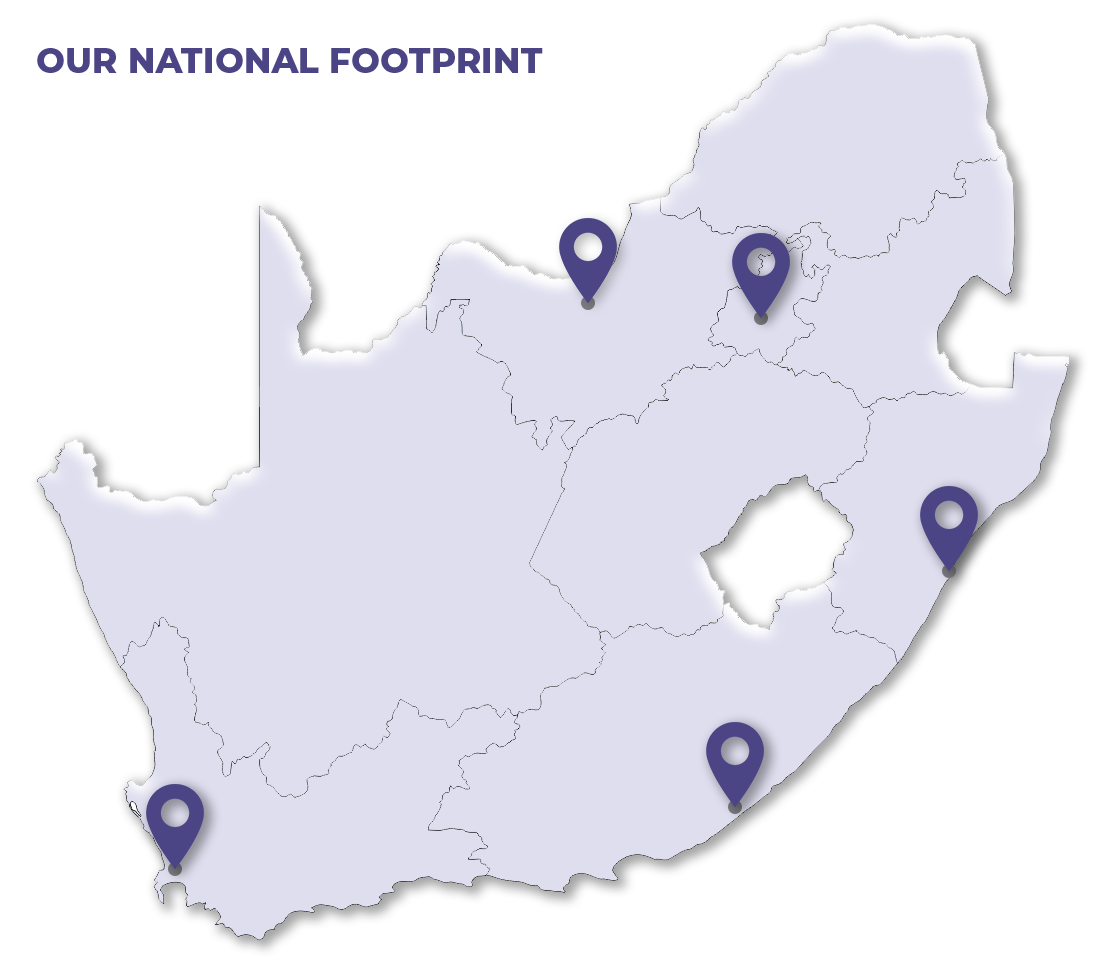
<style>
.page{position:relative;width:1096px;height:972px;background:#ffffff}
.page>*{position:absolute;margin:0}
.t1{font:34.4px "Montserrat-ExtraBold";color:#4b4586;text-transform:uppercase}
</style>
<div class="page">
<p class="t1" style="left:37px;top:48px;width:506px;height:25px">OUR NATIONAL FOOTPRINT</p>
</div>
